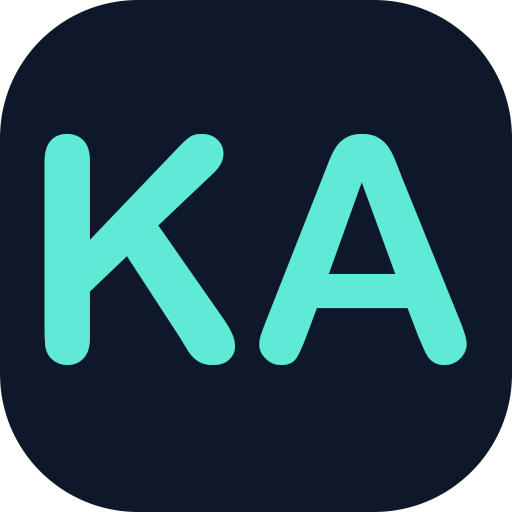
<style>
.page{position:relative;width:512px;height:512px;background:#0f172a}
.page>*{position:absolute;margin:0}
.t1{font:312.5px "ArialRoundedMTBold";color:#5eead4}
</style>
<div class="page">
<p class="t1" style="left:44px;top:134px;width:423px;height:231px">KA</p>
</div>
